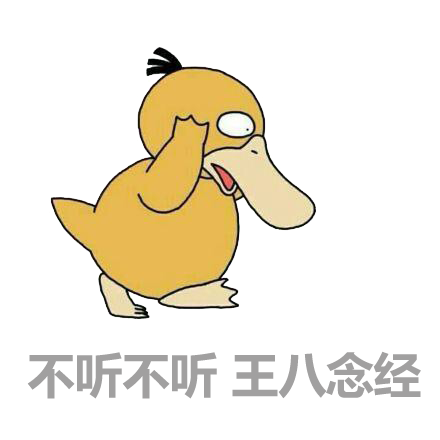
<style>
.page{position:relative;width:440px;height:440px;background:#ffffff}
.page>*{position:absolute;margin:0}
.t1{font:48px "MicrosoftYaHei-Bold";letter-spacing:-0.01em;color:#a1a0a0}
</style>
<div class="page">
<p class="t1" style="left:27px;top:351px;width:394px;height:48px">不听不听 王八念经</p>
</div>
